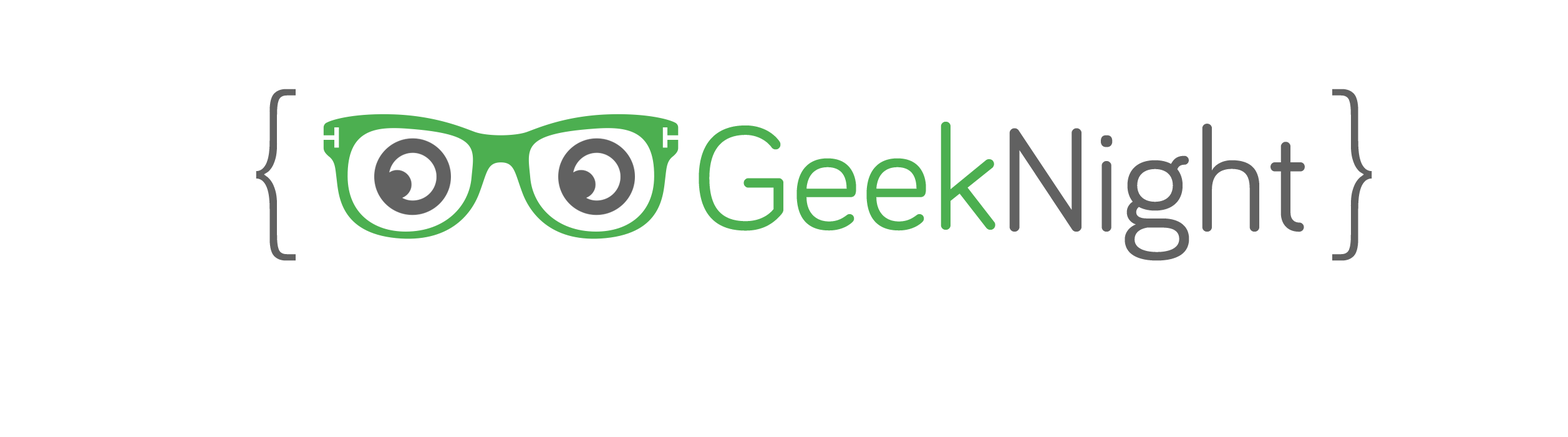
<style>
.page{position:relative;width:1568px;height:437px;background:#ffffff}
.page>*{position:absolute;margin:0}
.t1{font:187.1px "HelveticaNeue-Thin";color:#616161}
.t2{font:149.7px "Bariol-Regular";color:#4caf50}
.t3{font:149.7px "Bariol-Regular";color:#616161}
</style>
<div class="page">
<p class="t1" style="left:256px;top:89px;width:40px;height:172px">{</p>
<p class="t1" style="left:1332px;top:89px;width:40px;height:172px">}</p>
<p class="t2" style="left:699px;top:122px;width:296px;height:109px">Geek</p>
<p class="t3" style="left:1009px;top:123px;width:296px;height:138px">Night</p>
</div>
